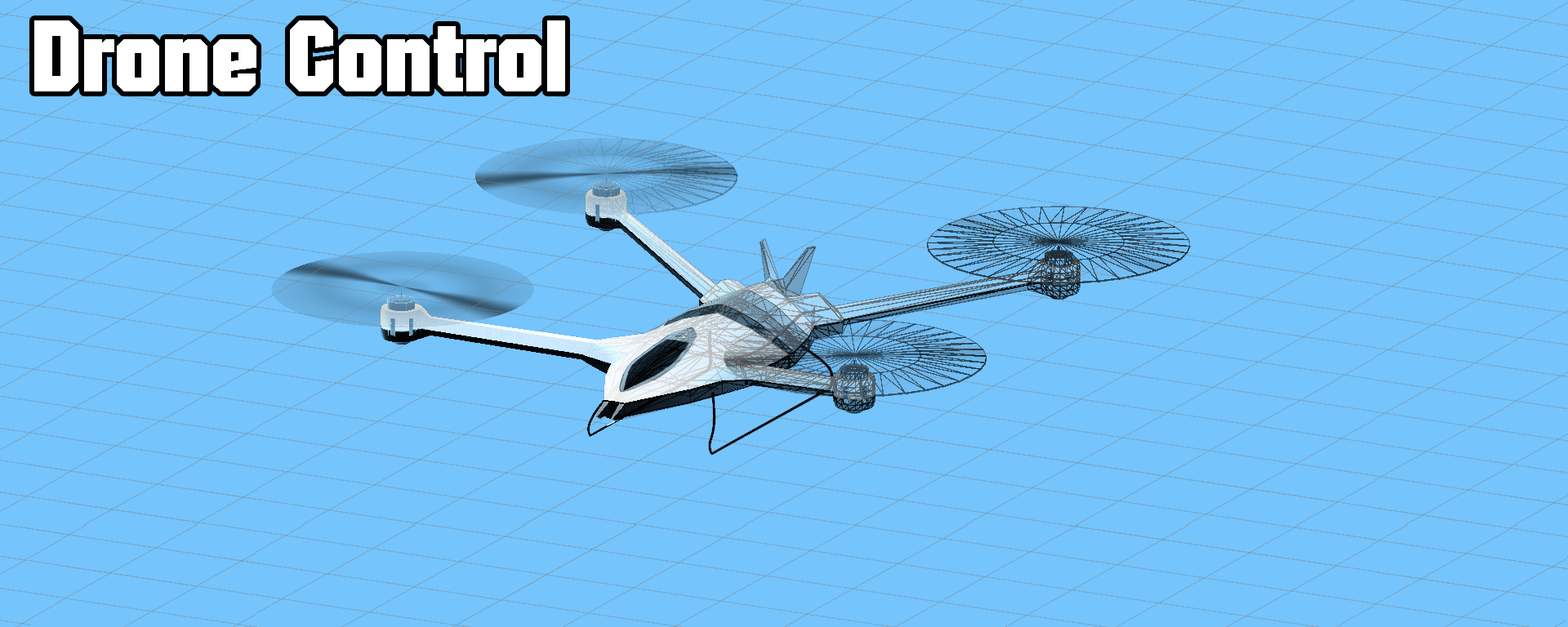
<style>
.page{position:relative;width:1568px;height:627px;background:#75c4fc}
.page>*{position:absolute;margin:0}
.t1{font:98px "Autumn";color:#ffffff}
</style>
<div class="page">
<p class="t1" style="left:34px;top:20px;width:531px;height:71px">Drone Control</p>
</div>
